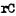
<style>
.page{position:relative;width:16px;height:16px;background:#ffffff}
.page>*{position:absolute;margin:0}
.t1{font:12px "MomsTypewriter";letter-spacing:-0.1em;color:#000000}
</style>
<div class="page">
<p class="t1" style="left:0px;top:3px;width:15px;height:10px">rC</p>
</div>
